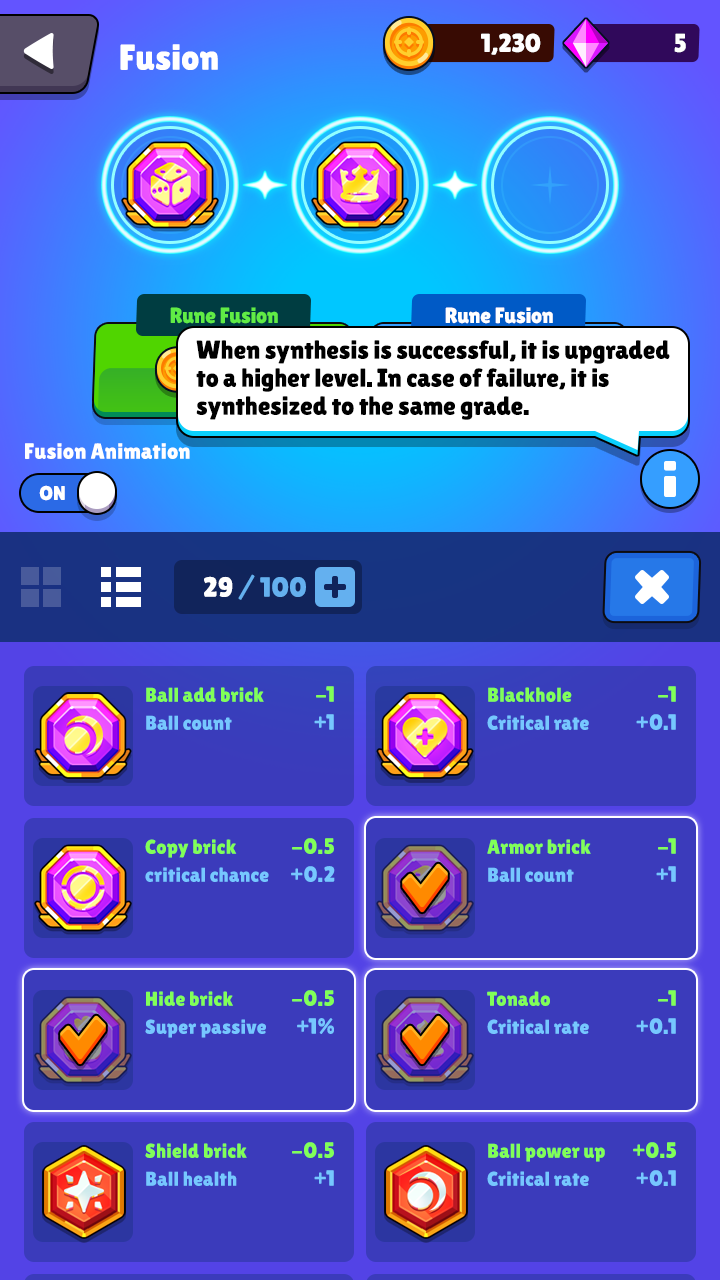
<style>
.page{position:relative;width:720px;height:1280px;background:#3b3bbb}
.page>*{position:absolute;margin:0}
.t1{font:26px "LilitaOne";letter-spacing:-0.01em;color:#ffffff;text-transform:uppercase}
.t2{font:36px "LilitaOne";color:#ffffff}
.t3{font:22px "LilitaOne";color:#60ec45}
.t4{font:22px "LilitaOne";color:#ffffff}
.t5{font:26px/28px "LilitaOne";letter-spacing:-0.01em;color:#000000}
.t6{font:20px "LilitaOne";color:#ffffff;text-transform:uppercase}
.t7{font:28px "LilitaOne";color:#64b0ef}
.t8{font:28px "LilitaOne";color:#ffffff}
.t9{font:20px/28px "LilitaOne";color:#81ff58}
.t10{font:20px/28px "LilitaOne";color:#76c7ff}
.t11{font:22px/28px "LilitaOne";color:#81ff58}
.t12{font:22px/28px "LilitaOne";color:#76c7ff}
</style>
<div class="page">
<p class="t1" style="left:481px;top:33px;width:60px;height:22px">1,230</p>
<p class="t1" style="left:674px;top:33px;width:12px;height:20px">5</p>
<p class="t2" style="left:120px;top:44px;width:98px;height:26px">Fusion</p>
<p class="t3" style="left:170px;top:307px;width:108px;height:17px">Rune Fusion</p>
<p class="t4" style="left:445px;top:307px;width:108px;height:17px">Rune Fusion</p>
<p class="t5" style="left:196px;top:340px;width:474px;height:80px">When synthesis is successful, it is upgraded<br>to a higher level. In case of failure, it is <br>synthesized to the same grade.</p>
<p class="t4" style="left:25px;top:443px;width:165px;height:16px">Fusion Animation</p>
<p class="t6" style="left:39px;top:485px;width:26px;height:16px">ON</p>
<p class="t7" style="left:204px;top:574px;width:102px;height:26px"><span class="t8">29 </span>/ 100</p>
<p class="t9" style="left:146px;top:687px;width:118px;height:43px">Ball add brick<br><span class="t10">Ball count</span></p>
<p class="t11" style="left:314px;top:686px;width:20px;height:44px;text-align:right">-1<br><span class="t12">+1</span></p>
<p class="t10" style="left:487px;top:687px;width:102px;height:43px"><span class="t9">Blackhole<br></span>Critical rate</p>
<p class="t12" style="left:636px;top:686px;width:40px;height:44px;text-align:right"><span class="t11">-1<br></span>+0.1</p>
<p class="t10" style="left:145px;top:839px;width:124px;height:43px"><span class="t9">Copy brick<br></span>critical chance</p>
<p class="t11" style="left:291px;top:838px;width:44px;height:44px;text-align:right">-0.5<br><span class="t12">+0.2</span></p>
<p class="t9" style="left:487px;top:839px;width:104px;height:43px">Armor brick<br><span class="t10">Ball count</span></p>
<p class="t11" style="left:656px;top:838px;width:20px;height:44px;text-align:right">-1<br><span class="t12">+1</span></p>
<p class="t11" style="left:292px;top:990px;width:42px;height:44px;text-align:right">-0.5<br><span class="t12">+1%</span></p>
<p class="t12" style="left:636px;top:990px;width:40px;height:44px;text-align:right"><span class="t11">-1<br></span>+0.1</p>
<p class="t10" style="left:145px;top:991px;width:121px;height:47px"><span class="t9">Hide brick<br></span>Super passive</p>
<p class="t10" style="left:487px;top:991px;width:102px;height:43px"><span class="t9">Tonado<br></span>Critical rate</p>
<p class="t9" style="left:145px;top:1143px;width:102px;height:43px">Shield brick<br><span class="t10">Ball health</span></p>
<p class="t11" style="left:292px;top:1142px;width:42px;height:44px;text-align:right">-0.5<br><span class="t12">+1</span></p>
<p class="t9" style="left:487px;top:1143px;width:118px;height:43px">Ball power up<br><span class="t10">Critical rate</span></p>
<p class="t11" style="left:633px;top:1142px;width:43px;height:44px;text-align:right">+0.5<br><span class="t12">+0.1</span></p>
</div>
